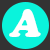
<style>
.page{position:relative;width:50px;height:50px;background:#0af3dc}
.page>*{position:absolute;margin:0}
.t1{font:37px "CooperBlackStd";letter-spacing:0.05em;color:#ffffff;font-style:italic}
</style>
<div class="page">
<p class="t1" style="left:9px;top:9px;width:32px;height:28px">A</p>
</div>
